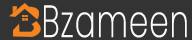
<style>
.page{position:relative;width:192px;height:40px;background:#333333}
.page>*{position:absolute;margin:0}
.t1{font:44.7px "Poppins-ExtraLight";letter-spacing:0.01em;color:#fcf9f9;font-weight:bold;scale:0.69 1}
</style>
<div class="page">
<p class="t1" style="left:44px;top:5px;width:143px;height:33px">Bzameen</p>
</div>
